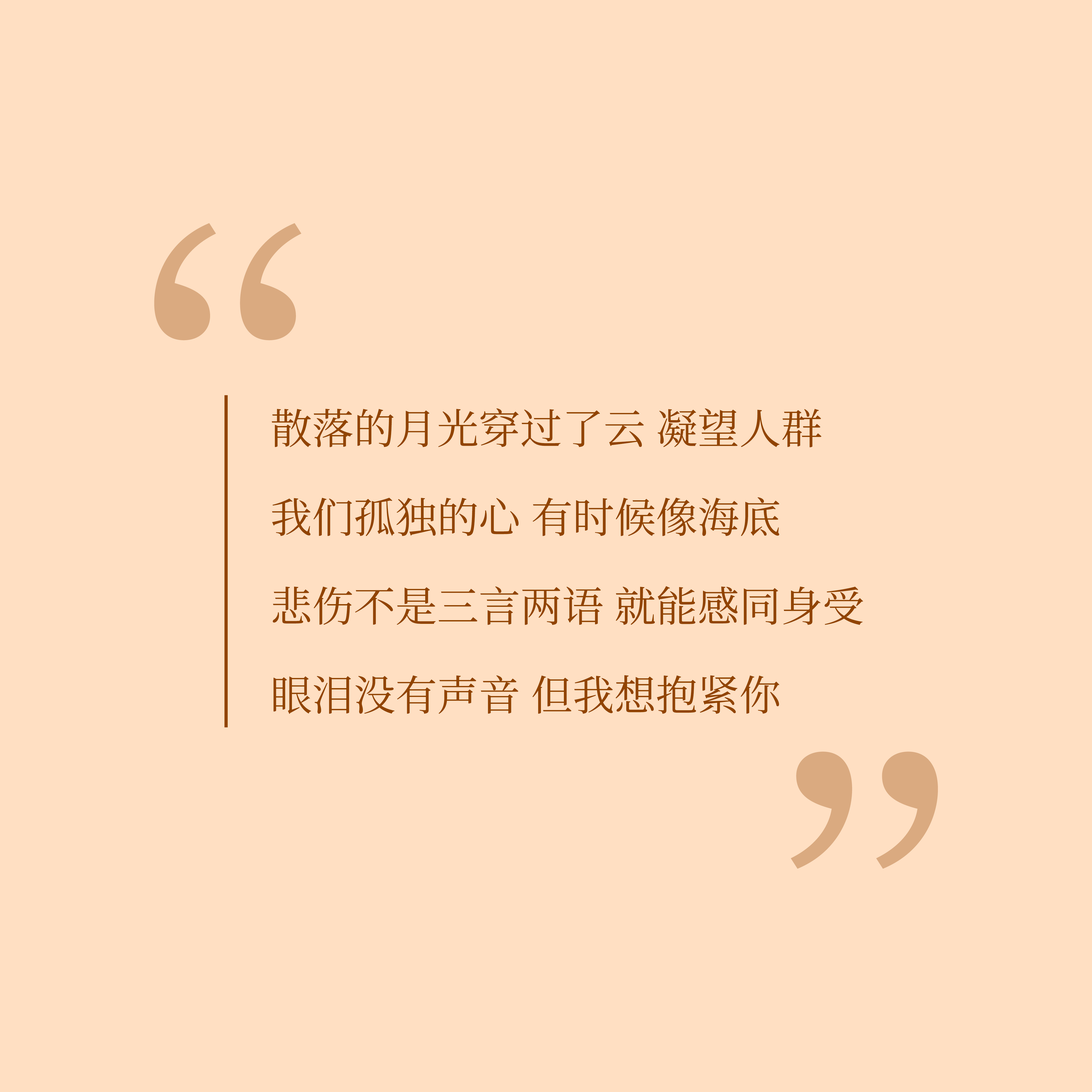
<style>
.page{position:relative;width:1092px;height:1092px;background:#ffdfc2}
.page>*{position:absolute;margin:0}
.t1{font:416.6px "SourceHanSerifSC-Regular";color:#daaa80;text-transform:uppercase}
.t2{font:41.7px/88.9px "SourceHanSerifSC-Regular";color:#914400;text-transform:uppercase}
</style>
<div class="page">
<p class="t1" style="left:154px;top:223px;width:148px;height:117px">“</p>
<p class="t2" style="left:272px;top:408px;width:591px;height:306px">散落的月光穿过了云 凝望人群<br>我们孤独的心 有时候像海底<br>悲伤不是三言两语 就能感同身受<br>眼泪没有声音 但我想抱紧你</p>
<p class="t1" style="left:791px;top:752px;width:147px;height:117px">”</p>
</div>
